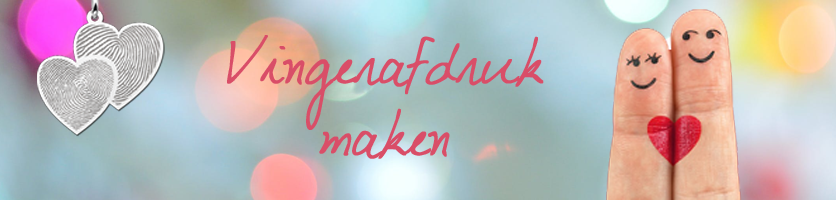
<style>
.page{position:relative;width:836px;height:200px}
.page>*{position:absolute;margin:0}
.t1{font:48px/72px "DJBMyBoyfriend'sHandwriting";color:#d94e68;font-weight:bold}
</style>
<div class="page">
<p class="t1" style="left:227px;top:35px;width:317px;height:124px;text-align:center">Vingerafdruk<br>maken</p>
</div>
